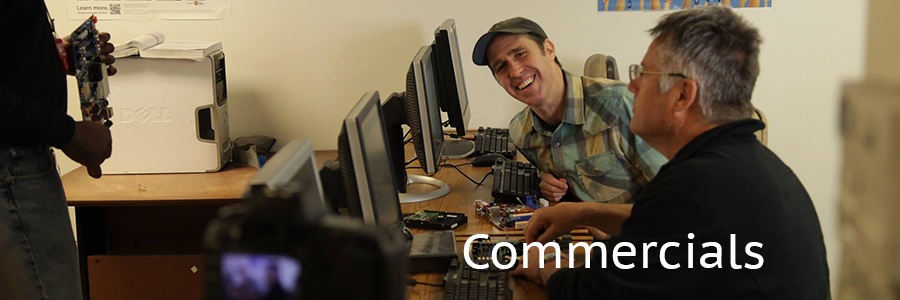
<style>
.page{position:relative;width:900px;height:300px}
.page>*{position:absolute;margin:0}
.t1{font:48px "PTSans-Caption";color:#ffffff}
</style>
<div class="page">
<p class="t1" style="left:463px;top:233px;width:301px;height:36px">Commercials</p>
</div>
